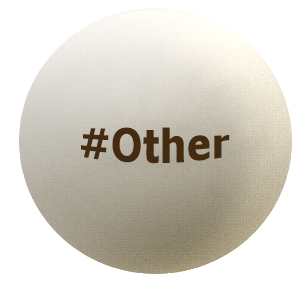
<style>
.page{position:relative;width:306px;height:290px;background:#ffffff}
.page>*{position:absolute;margin:0}
.t1{font:37.5px "Verdana-Bold";color:#442b10}
</style>
<div class="page">
<p class="t1" style="left:81px;top:127px;width:149px;height:37px">#Other</p>
</div>
